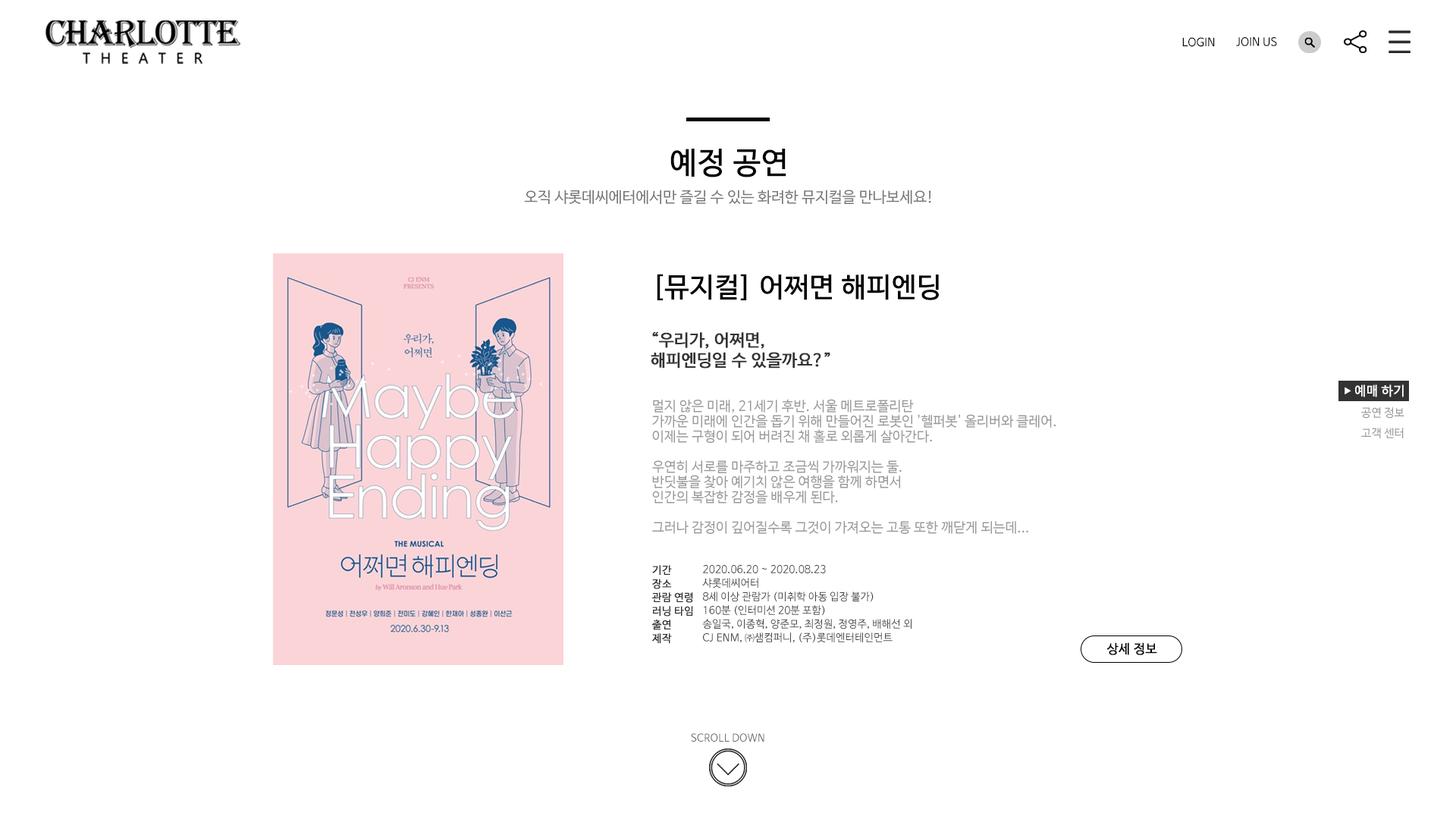
<style>
.page{position:relative;width:1456px;height:819px;background:#ffffff}
.page>*{position:absolute;margin:0}
.t1{font:11.4px "NanumBarunGothic-YetHangul";color:#010000}
.t2{font:11.4px "NanumBarunGothic-YetHangul";color:#000000}
.t3{font:30.3px "NanumBarunGothic-YetHangul";color:#000000;font-weight:bold}
.t4{font:15.2px "NanumBarunGothic-YetHangul";color:#777777}
.t5{font:27.3px "NanumBarunGothic-YetHangul";color:#000000;font-weight:bold}
.t6{font:16.7px "NanumBarunGothic-YetHangul";color:#333333;font-weight:bold}
.t7{font:7.6px "NanumBarunGothic-YetHangul";color:#ffffff;font-weight:bold}
.t8{font:12.9px "NanumBarunGothic-YetHangul";color:#ffffff;font-weight:bold}
.t9{font:13.6px/15.2px "NanumBarunGothic-YetHangul";color:#999999}
.t10{font:10.6px/13.6px "NanumBarunGothic-YetHangul";color:#333333;font-weight:bold}
.t11{font:10.6px/13.6px "NanumBarunGothic-YetHangul";color:#444444}
.t12{font:12.8px "NanumBarunGothic-YetHangul";color:#000000;font-weight:bold}
.t13{font:10.6px "NanumBarunGothic-YetHangul";color:#6e6e6e}
</style>
<div class="page">
<p class="t1" style="left:1182px;top:37px;width:33px;height:10px">LOGIN</p>
<p class="t2" style="left:1236px;top:37px;width:41px;height:9px">JOIN US</p>
<p class="t3" style="left:670px;top:149px;width:116px;height:28px">예정 공연</p>
<p class="t4" style="left:524px;top:190px;width:407px;height:14px">오직 샤롯데씨에터에서만 즐길 수 있는 화려한 뮤지컬을 만나보세요!</p>
<p class="t5" style="left:657px;top:274px;width:282px;height:26px">[뮤지컬] 어쩌면 해피엔딩</p>
<p class="t6" style="left:651px;top:331px;width:179px;height:38px">“우리가, 어쩌면,<br>해피엔딩일 수 있을까요?”</p>
<p class="t7" style="left:1345px;top:387px;width:6px;height:7px">▶</p>
<p class="t8" style="left:1355px;top:384px;width:49px;height:13px">예매 하기</p>
<p class="t9" style="left:652px;top:399px;width:404px;height:135px">멀지 않은 미래, 21세기 후반. 서울 메트로폴리탄<br>가까운 미래에 인간을 돕기 위해 만들어진 로봇인 '헬퍼봇' 올리버와 클레어.<br>이제는 구형이 되어 버려진 채 홀로 외롭게 살아간다.<br><br>우연히 서로를 마주하고 조금씩 가까워지는 둘.<br>반딧불을 찾아 예기치 않은 여행을 함께 하면서<br>인간의 복잡한 감정을 배우게 된다.<br><br>그러나 감정이 깊어질수록 그것이 가져오는 고통 또한 깨닫게 되는데...</p>
<p class="t10" style="left:651px;top:565px;width:42px;height:79px">기간 <br>장소 <br>관람 연령<br>러닝 타임 <br>출연<br>제작</p>
<p class="t11" style="left:702px;top:565px;width:210px;height:78px">2020.06.20 ~ 2020.08.23<br>  샤롯데씨어터<br>  8세 이상 관람가 (미취학 아동 입장 불가)<br>  160분 (인터미션 20분 포함)<br>  송일국, 이종혁, 양준모, 최정원, 정영주, 배해선 외<br>  CJ ENM, ㈜샘컴퍼니, (주)롯데엔터테인먼트</p>
<p class="t12" style="left:1106px;top:642px;width:51px;height:13px">상세 정보</p>
<p class="t13" style="left:691px;top:733px;width:73px;height:9px">SCROLL DOWN</p>
</div>
